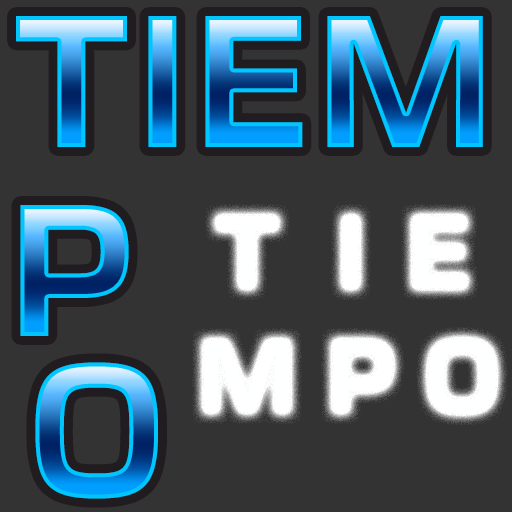
<style>
.page{position:relative;width:512px;height:512px;background:#333333}
.page>*{position:absolute;margin:0}
.t1{font:182px "NewScience-Bold";letter-spacing:0.045em;text-transform:uppercase;scale:0.94 1}
.t2{font:182px "NewScience-Bold";letter-spacing:0.04em;text-transform:uppercase;scale:0.94 1}
.t3{font:99.7px "NewScience-Bold";letter-spacing:0.04em;color:#feffff;text-transform:uppercase;scale:0.94 1}
</style>
<div class="page">
<p class="t1" style="left:16px;top:16px;width:467px;height:131px">TIEM</p>
<p class="t2" style="left:20px;top:205px;width:109px;height:131px">P</p>
<p class="t3" style="left:217px;top:216px;width:61px;height:72px">T</p>
<p class="t3" style="left:413px;top:216px;width:54px;height:72px">e</p>
<p class="t3" style="left:204px;top:340px;width:86px;height:72px">m</p>
<p class="t3" style="left:333px;top:340px;width:60px;height:72px">p</p>
<p class="t3" style="left:428px;top:339px;width:68px;height:75px">o</p>
<p class="t2" style="left:35px;top:362px;width:123px;height:137px">O</p>
</div>
